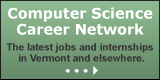
<style>
.page{position:relative;width:160px;height:80px}
.page>*{position:absolute;margin:0}
.t1{font:14.4px/16px "Verdana-Bold";color:#ffffff}
.t2{font:10px/11px "Arial-BoldMT";color:#333333}
</style>
<div class="page">
<p class="t1" style="left:8px;top:7px;width:145px;height:28px;text-align:center">Computer Science<br>Career Network</p>
<p class="t2" style="left:6px;top:43px;width:147px;height:19px;text-align:center">The latest jobs and internships <br>in Vermont and elsewhere.</p>
</div>
